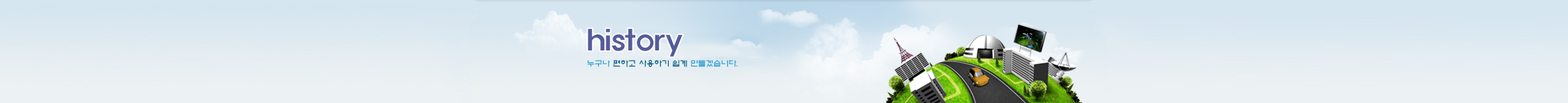
<style>
.page{position:relative;width:1568px;height:103px}
.page>*{position:absolute;margin:0}
.t1{font:27.7px "ExpoM-HM";color:#565b9a}
.t2{font:7.6px "ExpoM-HM";color:#0a5e84}
.t3{font:7.6px "ExpoM-HM";color:#329fd0}
</style>
<div class="page">
<p class="t1" style="left:588px;top:28px;width:94px;height:29px">history</p>
<p class="t2" style="left:588px;top:59px;width:150px;height:8px"><span class="t3">누구나 </span>편하고 사용하기 쉽게<span class="t3"> 만들겠습니다.</span></p>
</div>
